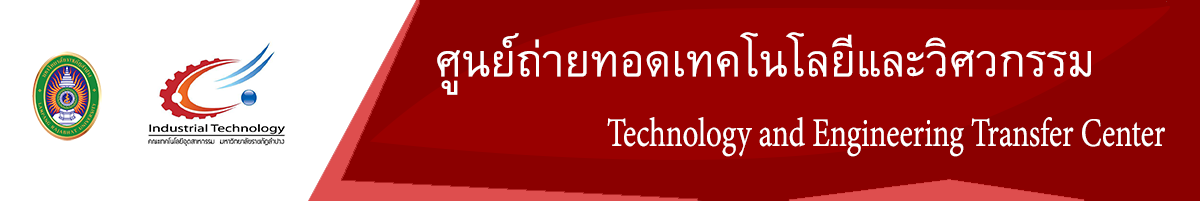
<style>
.page{position:relative;width:1200px;height:201px;background:#990000}
.page>*{position:absolute;margin:0}
.t1{font:62.9px "BrowalliaNew";color:#ffffff}
.t2{font:49px "AdobeThai-Regular";color:#ffffff;scale:0.77 1}
</style>
<div class="page">
<p class="t1" style="left:437px;top:32px;width:654px;height:63px">ศูนย์ถ่ายทอดเทคโนโลยีและวิศวกรรม</p>
<p class="t2" style="left:607px;top:117px;width:558px;height:40px">Technology and Engineering Transfer Center</p>
</div>
